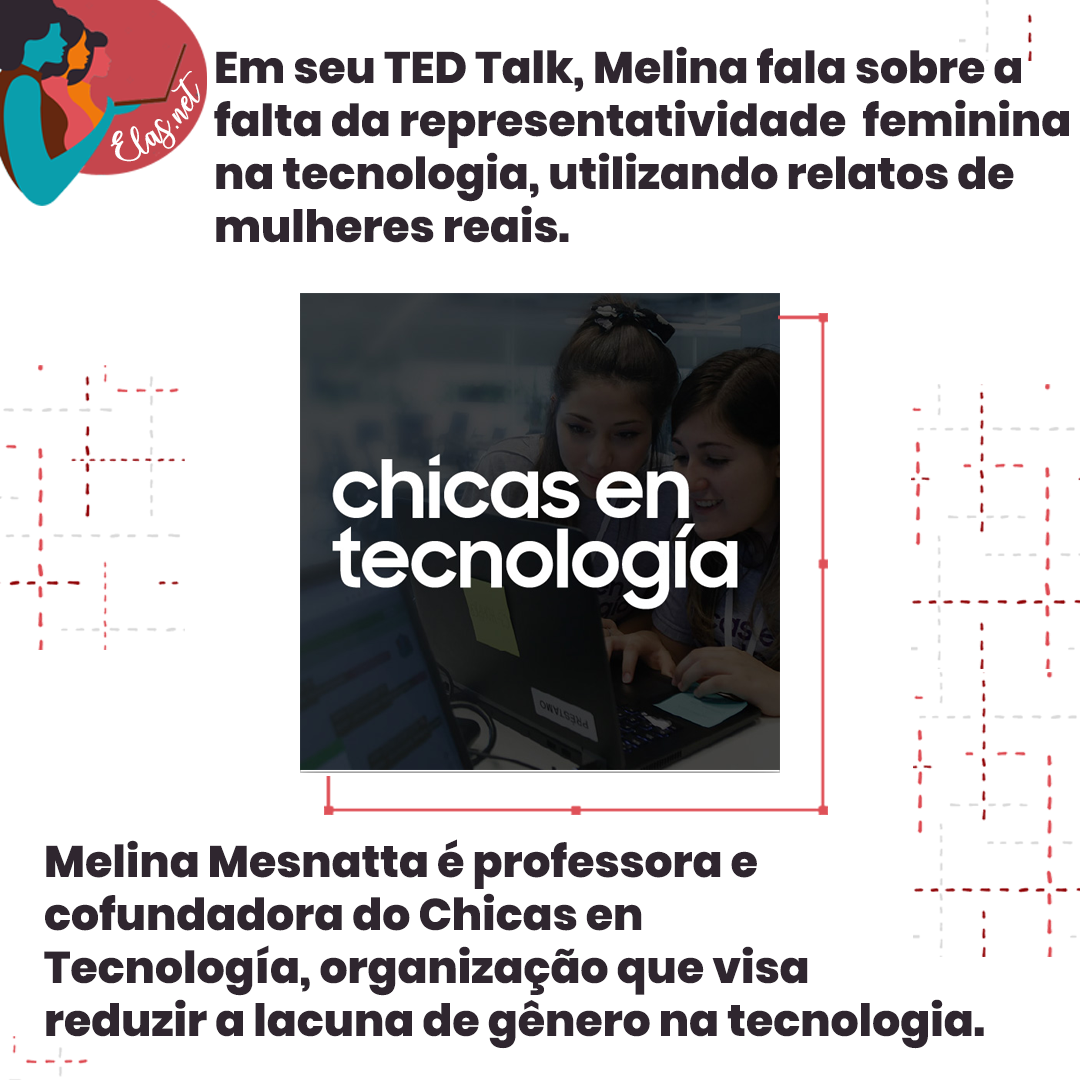
<style>
.page{position:relative;width:1080px;height:1080px;background:#ffffff}
.page>*{position:absolute;margin:0}
.t1{font:44.1px "Poppins-ExtraBold";color:#2f262f}
.t2{font:25.7px "charlinda-Regular";color:#ffffff;scale:1.18 1}
</style>
<div class="page">
<p class="t1" style="left:214px;top:46px;width:855px;height:197px">Em seu TED Talk, Melina fala sobre a<br>falta da representatividade  feminina<br>na tecnologia, utilizando relatos de <br>mulheres reais.</p>
<p class="t2" style="left:110px;top:71px;width:90px;height:91px;rotate:-43deg">Elas.net</p>
<p class="t1" style="left:44px;top:839px;width:940px;height:210px">Melina Mesnatta é professora e<br>cofundadora do Chicas en <br>Tecnología, organização que visa <br>reduzir a lacuna de gênero na tecnologia.</p>
</div>
